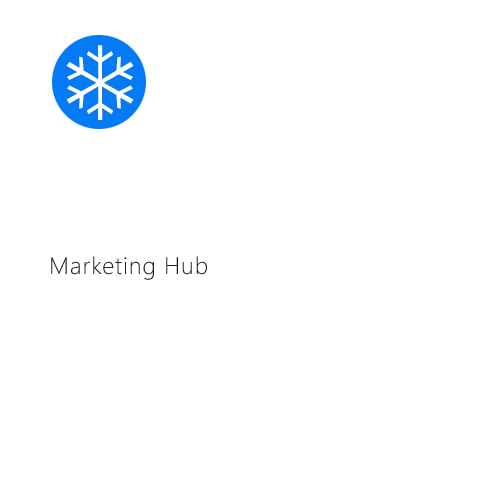
<style>
.page{position:relative;width:500px;height:500px;background:#ffffff}
.page>*{position:absolute;margin:0}
.t1{font:22px "MicrosoftJhengHeiLight";letter-spacing:0.04em;color:#202020}
</style>
<div class="page">
<p class="t1" style="left:51px;top:256px;width:156px;height:24px">Marketing Hub</p>
</div>
